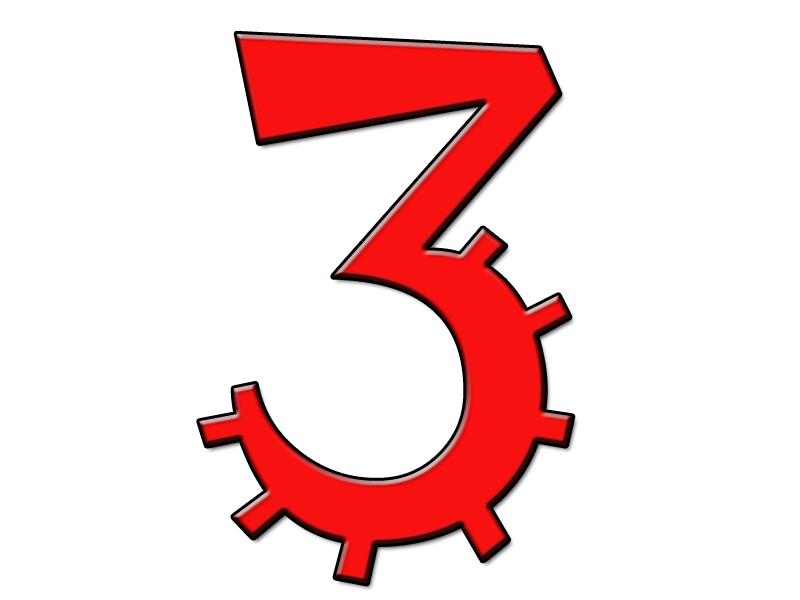
<style>
.page{position:relative;width:800px;height:600px;background:#ffffff}
.page>*{position:absolute;margin:0}
.t1{font:600px "Jokerman-Regular";color:#f81111}
</style>
<div class="page">
<p class="t1" style="left:199px;top:33px;width:374px;height:551px">3</p>
</div>
